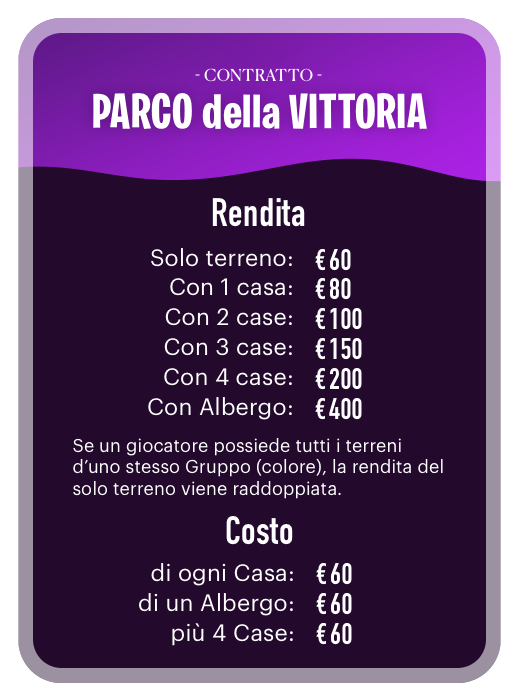
<style>
.page{position:relative;width:527px;height:700px;background:#230a2d}
.page>*{position:absolute;margin:0}
.t1{font:16.5px "CanelaDeck-Regular";letter-spacing:0.01em;color:#ffffff;text-transform:uppercase}
.t2{font:49.3px "BurbankBigCondensed-Bold";letter-spacing:0.01em;color:#ffffff}
.t3{font:39.1px "DINCondensed-Bold";letter-spacing:0.01em;color:#ffffff}
.t4{font:23.2px "Graphik-Regular";letter-spacing:0.01em;color:#ffffff}
.t5{font:29.4px "DINCondensed-Bold";letter-spacing:0.01em;color:#ffffff}
.t6{font:18px "Graphik-Regular";letter-spacing:0.01em;color:#ffffff}
</style>
<div class="page">
<p class="t1" style="left:195px;top:68px;width:127px;height:14px;opacity:0.97">- contratto -</p>
<p class="t2" style="left:93px;top:92px;width:334px;height:37px">PARCO della VITTORIA</p>
<p class="t3" style="left:212px;top:198px;width:93px;height:29px">Rendita</p>
<p class="t4" style="left:151px;top:248px;width:141px;height:19px">Solo terreno:</p>
<p class="t5" style="left:315px;top:249px;width:10px;height:22px">€</p>
<p class="t5" style="left:330px;top:249px;width:21px;height:22px">60</p>
<p class="t4" style="left:170px;top:278px;width:122px;height:18px">Con 1 casa:</p>
<p class="t5" style="left:315px;top:278px;width:10px;height:22px">€</p>
<p class="t5" style="left:330px;top:277px;width:21px;height:23px">80</p>
<p class="t4" style="left:165px;top:308px;width:127px;height:18px">Con 2 case:</p>
<p class="t5" style="left:315px;top:308px;width:10px;height:22px">€</p>
<p class="t5" style="left:330px;top:308px;width:32px;height:22px">100</p>
<p class="t4" style="left:164px;top:338px;width:128px;height:18px">Con 3 case:</p>
<p class="t5" style="left:315px;top:338px;width:10px;height:22px">€</p>
<p class="t5" style="left:330px;top:338px;width:32px;height:22px">150</p>
<p class="t4" style="left:164px;top:368px;width:128px;height:18px">Con 4 case:</p>
<p class="t5" style="left:315px;top:368px;width:10px;height:22px">€</p>
<p class="t5" style="left:330px;top:367px;width:32px;height:23px">200</p>
<p class="t4" style="left:148px;top:397px;width:144px;height:23px">Con Albergo:</p>
<p class="t5" style="left:315px;top:398px;width:10px;height:22px">€</p>
<p class="t5" style="left:329px;top:398px;width:33px;height:22px">400</p>
<p class="t6" style="left:73px;top:438px;width:370px;height:61px">Se un giocatore possiede tutti i terreni d’uno stesso Gruppo (colore), la rendita del solo terreno viene raddoppiata.</p>
<p class="t3" style="left:226px;top:516px;width:67px;height:29px">Costo</p>
<p class="t4" style="left:151px;top:563px;width:142px;height:23px">di ogni Casa:</p>
<p class="t5" style="left:316px;top:563px;width:10px;height:22px">€</p>
<p class="t5" style="left:331px;top:563px;width:21px;height:22px">60</p>
<p class="t4" style="left:139px;top:593px;width:154px;height:23px">di un Albergo:</p>
<p class="t5" style="left:316px;top:593px;width:10px;height:22px">€</p>
<p class="t5" style="left:331px;top:593px;width:21px;height:22px">60</p>
<p class="t4" style="left:172px;top:623px;width:121px;height:23px">più 4 Case:</p>
<p class="t5" style="left:316px;top:623px;width:10px;height:22px">€</p>
<p class="t5" style="left:331px;top:623px;width:21px;height:22px">60</p>
</div>
